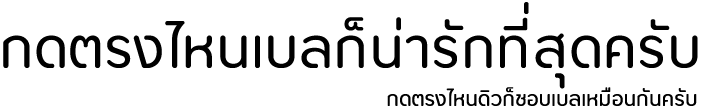
<style>
.page{position:relative;width:702px;height:108px;background:#ffffff}
.page>*{position:absolute;margin:0}
.t1{font:45.8px/137.5px "Opun-Regular";color:#000000;font-weight:bold}
.t2{font:16.7px "Opun-Regular";color:#000000;font-weight:bold}
</style>
<div class="page">
<p class="t1" style="left:3px;top:2px;width:695px;height:87px;text-align:center">กดตรงไหนเบลก็น่ารักที่สุดครับ</p>
<p class="t2" style="left:387px;top:87px;width:310px;height:19px">กดตรงไหนดิวก็ชอบเบลเหมือนกันครับ</p>
</div>
